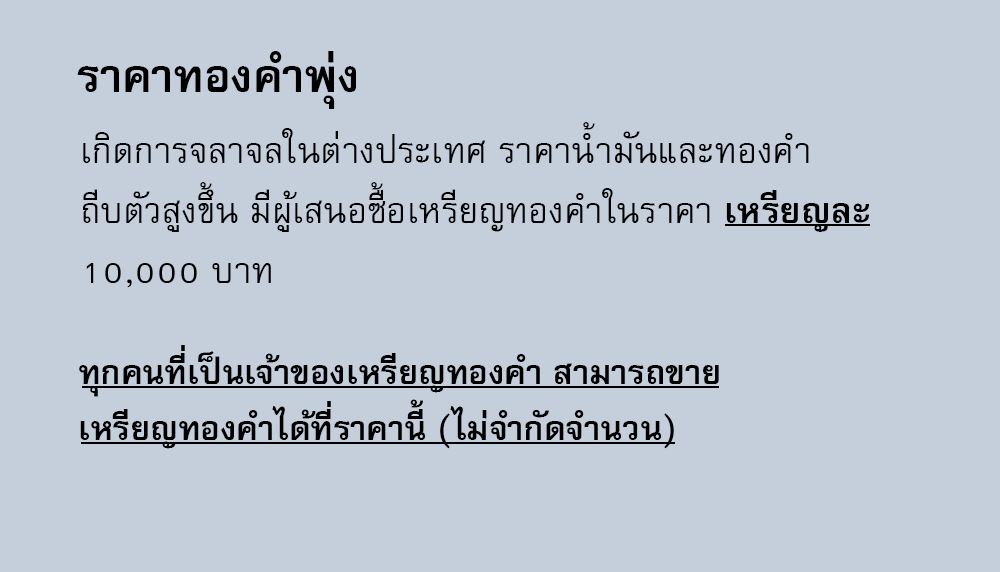
<style>
.page{position:relative;width:1000px;height:572px;background:#c5cedb}
.page>*{position:absolute;margin:0}
.t1{font:64px "FreesiaUPCBold";color:#000000}
.t2{font:50px/60px "FreesiaUPC";color:#000000}
.t3{font:50px/60px "FreesiaUPCBold";color:#000000}
.t4{font:47px "FreesiaUPCBold";color:#000000}
</style>
<div class="page">
<p class="t1" style="left:77px;top:51px;width:279px;height:58px">ราคาทองคำพุ่ง</p>
<p class="t2" style="left:83px;top:122px;width:786px;height:166px">เกิดการจลาจลในต่างประเทศ ราคาน้ำมันและทองคำ<br>ถีบตัวสูงขึ้น มีผู้เสนอซื้อเหรียญทองคำในราคา <span class="t3">เหรียญละ<br></span>10,000 บาท</p>
<p class="t4" style="left:79px;top:345px;width:640px;height:104px">ทุกคนที่เป็นเจ้าของเหรียญทองคำ สามารถขาย<br>เหรียญทองคำได้ที่ราคานี้ (ไม่จำกัดจำนวน)</p>
</div>
